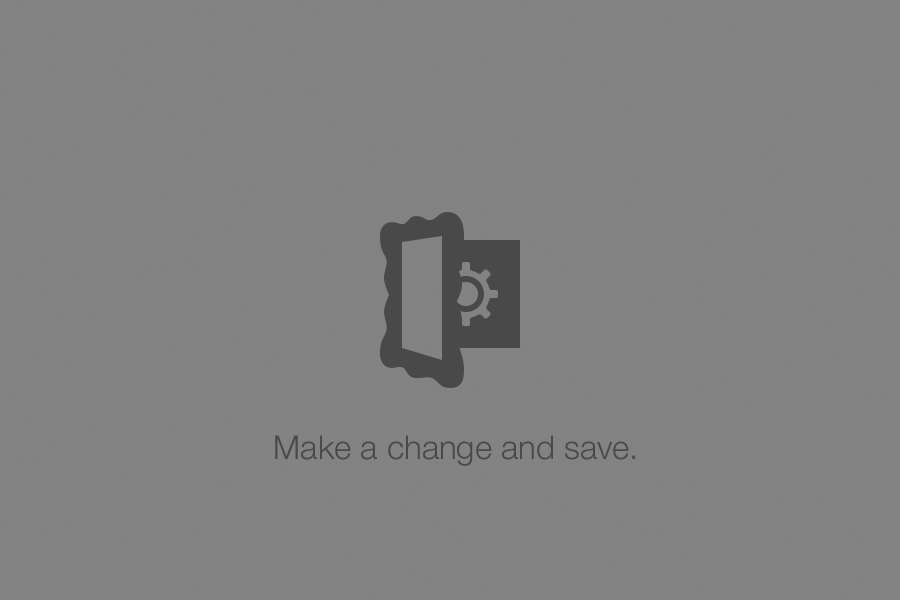
<style>
.page{position:relative;width:900px;height:600px;background:#838383}
.page>*{position:absolute;margin:0}
.t1{font:33px "HelveticaNeue-Light";color:#494949}
</style>
<div class="page">
<p class="t1" style="left:275px;top:435px;width:360px;height:31px">Make a change and save.</p>
</div>
